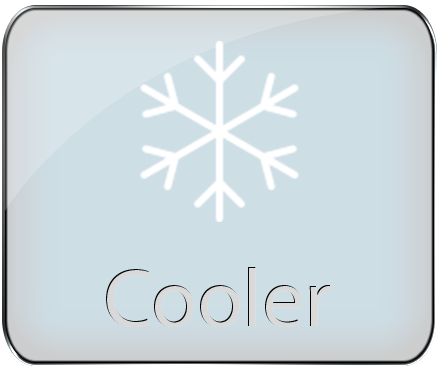
<style>
.page{position:relative;width:440px;height:369px;background:#cddee5}
.page>*{position:absolute;margin:0}
.t1{font:83.2px "MyriadPro-Regular";color:#d9d9d9}
</style>
<div class="page">
<p class="t1" style="left:106px;top:267px;width:224px;height:60px">Cooler</p>
</div>
